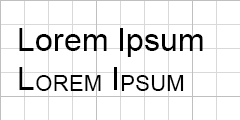
<style>
.page{position:relative;width:240px;height:120px;background:#ffffff}
.page>*{position:absolute;margin:0}
.t1{font:32px "ArialMT";color:#000000}
.t2{font:32px "ArialMT";color:#000000;font-variant:small-caps}
</style>
<div class="page">
<p class="t1" style="left:19px;top:28px;width:184px;height:63px">Lorem Ipsum<br><span class="t2">Lorem Ipsum</span></p>
</div>
